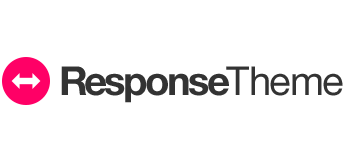
<style>
.page{position:relative;width:350px;height:160px;background:#ffffff}
.page>*{position:absolute;margin:0}
.t1{font:40px "HelveticaNeueLTPro-Bd";letter-spacing:-0.075em;color:#333333}
.t2{font:40px "HelveticaNeueLTPro-Roman";letter-spacing:-0.025em;color:#333333}
</style>
<div class="page">
<p class="t1" style="left:61px;top:66px;width:282px;height:37px">Response<span class="t2">Theme</span></p>
</div>
